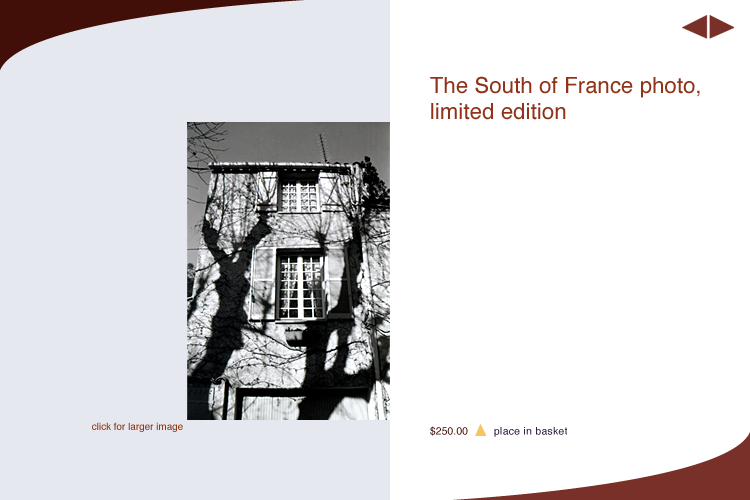
<style>
.page{position:relative;width:750px;height:500px;background:#ffffff}
.page>*{position:absolute;margin:0}
.t1{font:22px "Helvetica";letter-spacing:0.007em;color:#903419}
.t2{font:9.9px "Helvetica";color:#933817}
.t3{font:10.4px "Helvetica";letter-spacing:0.007em;color:#410f08}
.t4{font:10.4px "Helvetica";letter-spacing:0.028em;color:#321e3f}
</style>
<div class="page">
<p class="t1" style="left:430px;top:76px;width:270px;height:44px">The South of France photo,<br>limited edition</p>
<p class="t2" style="left:92px;top:422px;width:91px;height:10px">click for larger image</p>
<p class="t3" style="left:430px;top:426px;width:38px;height:10px">$250.00</p>
<p class="t4" style="left:494px;top:427px;width:73px;height:10px">place in basket</p>
</div>
